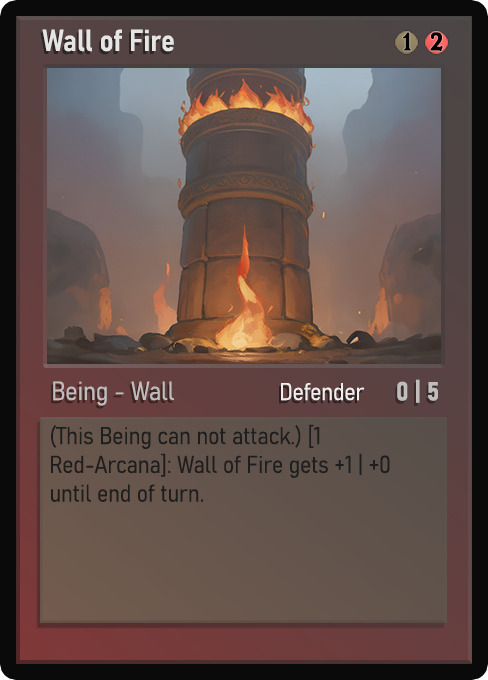
<style>
.page{position:relative;width:488px;height:680px}
.page>*{position:absolute;margin:0}
.t1{font:30px "Bahnschrift-SemiBoldSemiCondensed";color:#f2f2f2;font-weight:bold}
.t2{font:25px "WTRRoycroft";color:#000000;font-weight:bold;scale:1.09 1}
.t3{font:26px "Bahnschrift-LightSemiCondensed";color:#c8c8c8;font-weight:bold}
.t4{font:24px "Bahnschrift-LightSemiCondensed";color:#f0efef;font-weight:bold}
.t5{font:26px "Bahnschrift-BoldSemiCondensed";color:#c1bdbd;font-weight:bold}
.t6{font:24px "Bahnschrift-LightSemiCondensed";color:#1e1e1e;font-weight:bold}
</style>
<div class="page">
<p class="t1" style="left:42px;top:29px;width:132px;height:23px;opacity:0.9">Wall of Fire</p>
<p class="t2" style="left:403px;top:32px;width:8px;height:19px">1</p>
<p class="t2" style="left:430px;top:32px;width:13px;height:19px">2</p>
<p class="t3" style="left:53px;top:381px;width:121px;height:25px;opacity:0.9">Being - Wall</p>
<p class="t4" style="left:281px;top:383px;width:84px;height:18px">Defender</p>
<p class="t5" style="left:397px;top:379px;width:41px;height:24px">0 | 5</p>
<p class="t6" style="left:51px;top:424px;width:339px;height:78px">(This Being can not attack.) [1 Red-Arcana]: Wall of Fire gets +1 | +0 until end of turn.</p>
</div>
